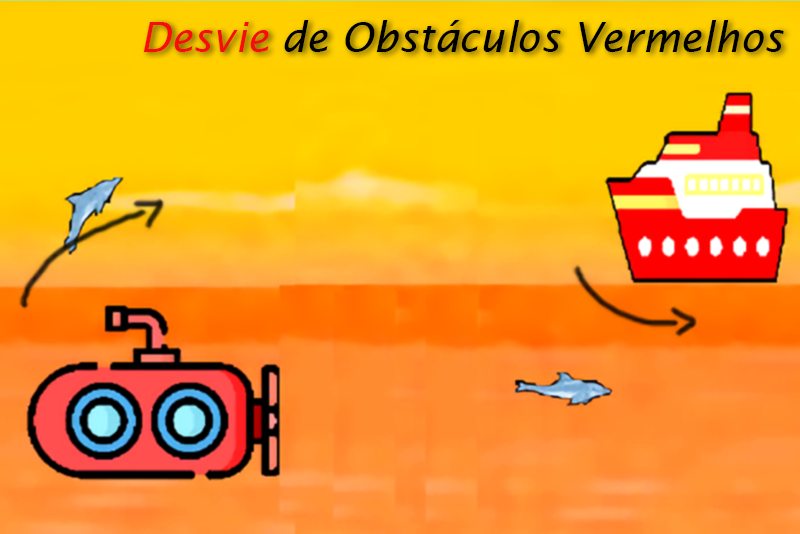
<style>
.page{position:relative;width:800px;height:534px}
.page>*{position:absolute;margin:0}
.t1{font:30.8px "LucidaSans-Italic";color:#000000}
.t2{font:30.8px "LucidaSans-Italic";color:#f80d0d}
</style>
<div class="page">
<p class="t1" style="left:143px;top:20px;width:641px;height:32px"><span class="t2">Desvie </span>de Obstáculos Vermelhos</p>
</div>
